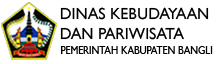
<style>
.page{position:relative;width:216px;height:64px;background:#ffffff}
.page>*{position:absolute;margin:0}
.t1{font:16.1px "GillSansMT";color:#000000}
.t2{font:11.6px "GillSansMT";color:#000000;scale:0.86 1}
</style>
<div class="page">
<p class="t1" style="left:60px;top:7px;width:149px;height:33px">DINAS KEBUDAYAAN <br>DAN PARIWISATA</p>
<p class="t2" style="left:61px;top:46px;width:152px;height:8px">PEMERINTAH KABUPATEN BANGLI</p>
</div>
